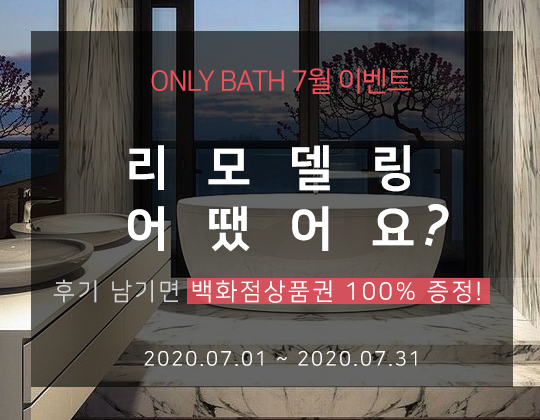
<style>
.page{position:relative;width:540px;height:420px}
.page>*{position:absolute;margin:0}
.t1{font:28px "NanumSquareR";letter-spacing:-0.035em;color:#f2505d}
.t2{font:48px/61px "NanumSquareEB";letter-spacing:0.1em;color:#ffffff}
.t3{font:54.1px "NanumSquareEB";letter-spacing:0.1em;color:#ffffff;scale:0.89 1}
.t4{font:24px "NanumSquareR";letter-spacing:0.1em;color:#ffffff}
.t5{font:24px "NanumSquareR";letter-spacing:0.1em;color:#d3d3d3}
.t6{font:20px "NanumSquareR";letter-spacing:0.1em;color:#fefefe}
</style>
<div class="page">
<p class="t1" style="left:151px;top:68px;width:260px;height:26px">ONLY BATH 7월 이벤트</p>
<p class="t2" style="left:128px;top:145px;width:286px;height:107px">리  모  델  링<br>어  땠  어  요</p>
<p class="t3" style="left:425px;top:204px;width:24px;height:42px;rotate:16deg">?</p>
<p class="t4" style="left:53px;top:279px;width:427px;height:24px"><span class="t5">후기 남기면 </span>백화점상품권 100% 증정!</p>
<p class="t6" style="left:144px;top:351px;width:273px;height:15px">2020.07.01 ~ 2020.07.31</p>
</div>
